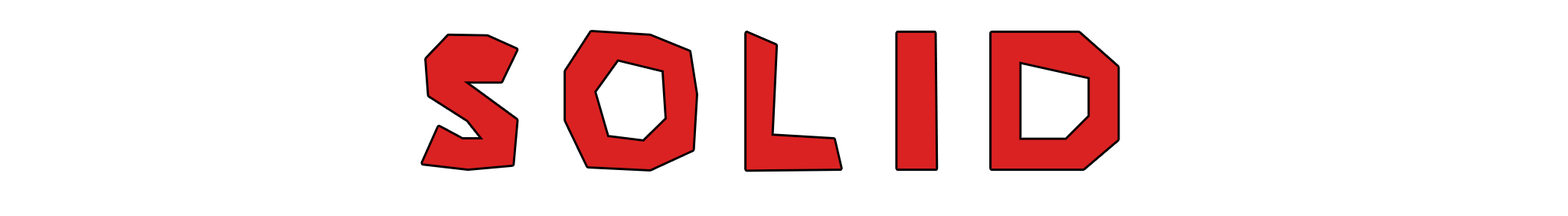
<style>
.page{position:relative;width:1568px;height:216px;background:#ffffff}
.page>*{position:absolute;margin:0}
.t1{font:198.3px "ZeroCool";letter-spacing:0.2em;color:#da2222}
</style>
<div class="page">
<p class="t1" style="left:423px;top:32px;width:695px;height:138px">SOLID</p>
</div>
